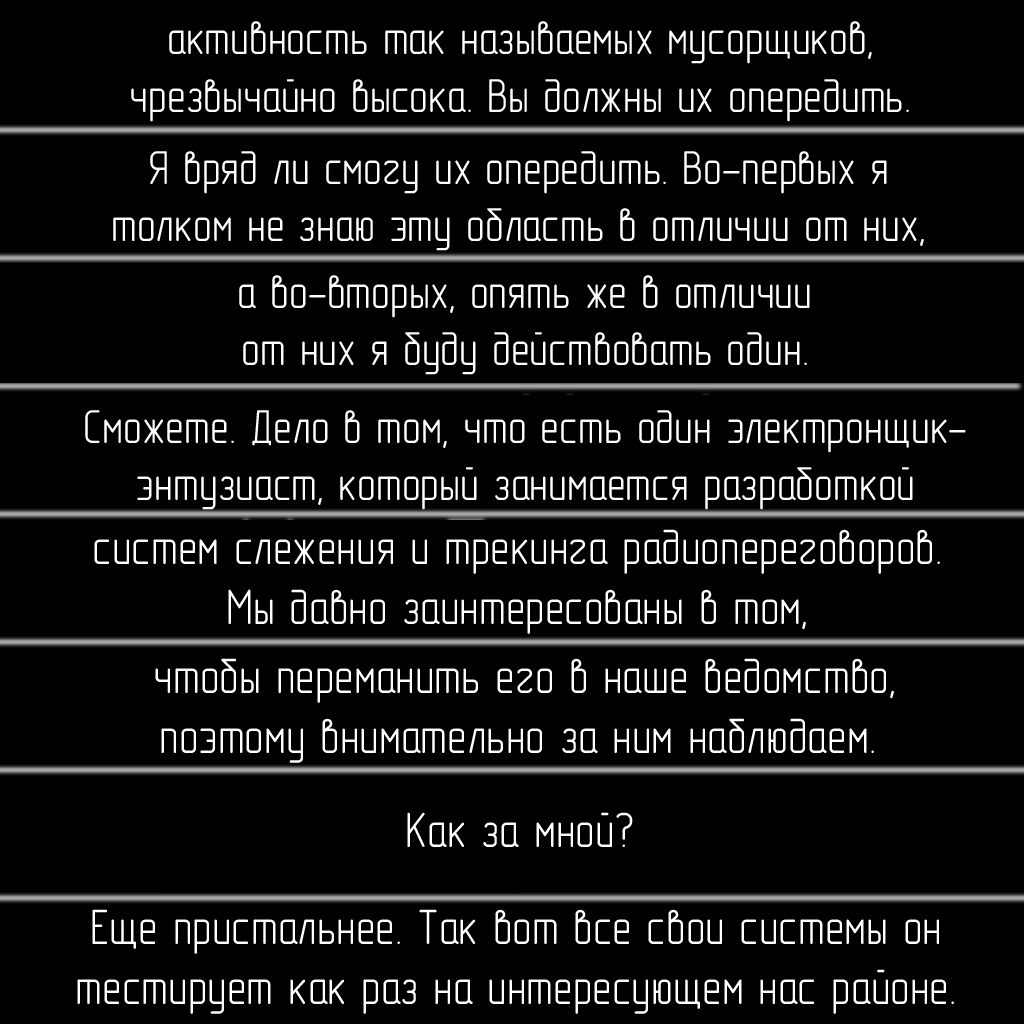
<style>
.page{position:relative;width:1024px;height:1024px;background:#000000}
.page>*{position:absolute;margin:0}
.t1{font:48px "GOST-2.304-81typeA";color:#ffffff}
.t2{font:50px "GOST-2.304-81typeA";color:#ffffff}
</style>
<div class="page">
<p class="t1" style="left:131px;top:21px;width:778px;height:101px;text-align:center">активность так называемых мусорщиков,<br>чрезвычайно высока. Вы должны их опередить.</p>
<p class="t1" style="left:113px;top:151px;width:811px;height:100px;text-align:center">Я вряд ли смогу их опередить. Во-первых я<br>толком не знаю эту область в отличии от них,</p>
<p class="t1" style="left:239px;top:275px;width:571px;height:100px;text-align:center">а во-вторых, опять же в отличии<br>от них я буду действовать один.</p>
<p class="t1" style="left:85px;top:410px;width:881px;height:100px;text-align:center">Сможете. Дело в том, что есть один электронщик-<br>энтузиаст, который занимается разработкой</p>
<p class="t2" style="left:94px;top:529px;width:846px;height:105px;text-align:center">систем слежения и трекинга радиопереговоров.<br>Мы давно заинтересованы в том,</p>
<p class="t2" style="left:155px;top:658px;width:739px;height:105px;text-align:center">чтобы переманить его в наше ведомство,<br>поэтому внимательно за ним наблюдаем.</p>
<p class="t2" style="left:407px;top:812px;width:226px;height:35px">Как за мной?</p>
<p class="t2" style="left:77px;top:909px;width:877px;height:105px;text-align:center">Еще пристальнее. Так вот все свои системы он<br>тестирует как раз на интересующем нас районе.</p>
</div>
